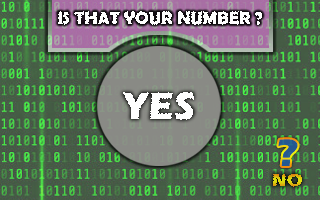
<style>
.page{position:relative;width:320px;height:200px}
.page>*{position:absolute;margin:0}
.t1{font:18px "BerlinSansFBDemi-Bold";color:#ffffff}
.t2{font:39.3px "ErasITC-Bold";color:#ffffff}
.t3{font:39.3px "ErasITC-Bold";color:#255891}
.t4{font:18px "ErasITC-Bold"}
</style>
<div class="page">
<p class="t1" style="left:58px;top:11px;width:205px;height:14px">IS THAT YOUR NUMBER ?</p>
<p class="t2" style="left:122px;top:92px;width:72px;height:28px">YES</p>
<p class="t3" style="left:278px;top:139px;width:20px;height:27px">?</p>
<p class="t4" style="left:273px;top:173px;width:29px;height:14px">NO</p>
</div>
